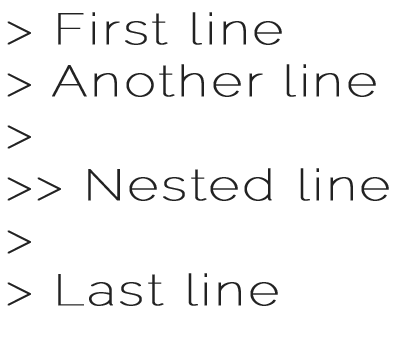
<style>
.page{position:relative;width:400px;height:356px;background:#ffffff}
.page>*{position:absolute;margin:0}
.t1{font:43.4px "Raleway-Thin";letter-spacing:0.05em;color:#222222;font-weight:bold;scale:1.2 1}
</style>
<div class="page">
<p class="t1" style="left:7px;top:12px;width:382px;height:294px">&gt; First line<br>&gt; Another line<br>&gt;<br>&gt;&gt; Nested line<br>&gt; <br>&gt; Last line</p>
</div>
